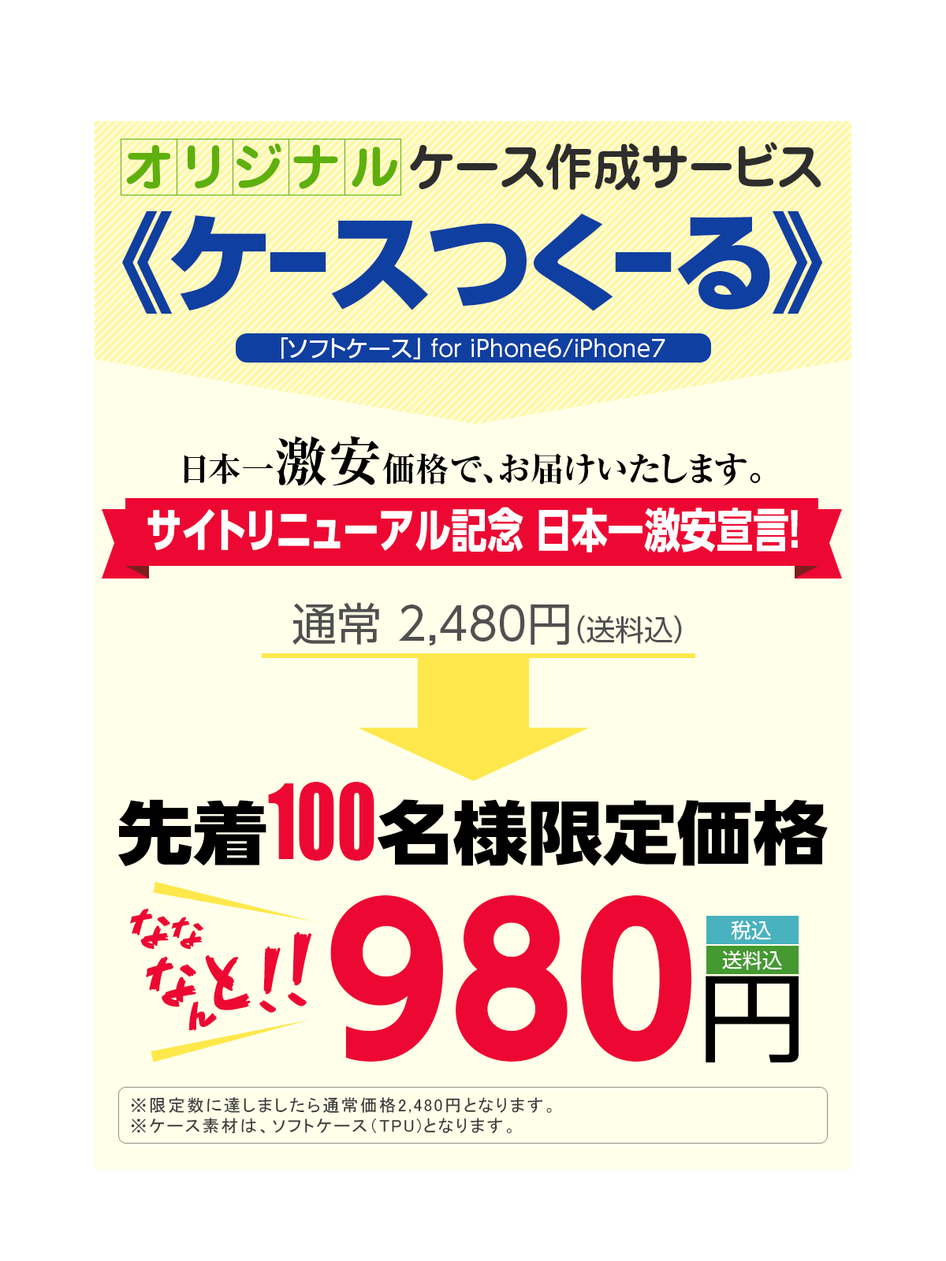
<style>
.page{position:relative;width:946px;height:1261px;background:#ffffff}
.page>*{position:absolute;margin:0}
.t1{font:50px "Jun501Pro-Bold";letter-spacing:0.2em;color:#5fb10f}
.t2{font:50px "Jun501Pro-Bold";color:#2d2d2d;scale:0.96 1}
.t3{font:108.1px "UDShinGoPro-Heavy";letter-spacing:-0.075em;color:#0f3fa1}
.t4{font:108.1px "UDShinGoPro-Heavy";letter-spacing:-0.075em;color:#0f3fa1;scale:0.6 1}
.t5{font:22.7px "UDShinGoPro-Regular";color:#ffffff}
.t6{font:33.8px "RyuminPro-ExBold";color:#000000}
.t7{font:53.5px "RyuminPro-ExBold";color:#000000}
.t8{font:46.7px "UDShinGoPro-Bold";color:#ffffff;scale:0.78 1}
.t9{font:44.9px "UDShinGoPro-Regular";color:#505050}
.t10{font:29.1px "UDShinGoPro-Regular";color:#505050}
.t11{font:68.9px "UDShinGoPro-Heavy";color:#000000;scale:1.09 1}
.t12{font:95px "Impact";color:#ed0833;scale:0.79 1}
.t13{font:198.9px "UDShinGoPro-Bold";color:#ed0833;scale:0.95 1}
.t14{font:51.4px "851CHIKARA-DZUYOKU-KANA-A";color:#ed0833}
.t15{font:40.9px "851CHIKARA-DZUYOKU-KANA-A";color:#ed0833}
.t16{font:20px "UDShinGoPro-Regular";color:#ffffff}
.t17{font:76.4px "851CHIKARA-DZUYOKU-KANA-A";letter-spacing:-0.1em;color:#ed0833}
.t18{font:85.9px "851CHIKARA-DZUYOKU-KANA-A";letter-spacing:-0.1em;color:#ed0833}
.t19{font:64.9px "851CHIKARA-DZUYOKU-KANA-A";color:#ed0833}
.t20{font:39.5px "851CHIKARA-DZUYOKU-KANA-A";letter-spacing:-0.1em;color:#ed0833}
.t21{font:81.2px "851CHIKARA-DZUYOKU-KANA-A";letter-spacing:-0.1em;color:#ed0833}
.t22{font:97.1px "UDShinGoPro-Regular";color:#000000;scale:1.12 1}
.t23{font:17.2px "MS-PGothic";letter-spacing:0.1em;color:#3a3a3a}
</style>
<div class="page">
<p class="t1" style="left:126px;top:143px;width:271px;height:46px">オリジナル</p>
<p class="t2" style="left:410px;top:142px;width:411px;height:49px">ケース作成サービス</p>
<p class="t3" style="left:122px;top:211px;width:701px;height:103px">《ケ<span class="t4">ー</span>スつく<span class="t4">ー</span>る》</p>
<p class="t5" style="left:281px;top:337px;width:384px;height:22px">「ソフトケース」 for iPhone6/iPhone7</p>
<p class="t6" style="left:184px;top:436px;width:576px;height:50px">日本一<span class="t7">激安</span>価格で、お届けいたします。</p>
<p class="t8" style="left:147px;top:507px;width:651px;height:45px">サイトリニューアル記念 日本一激安宣言！</p>
<p class="t9" style="left:292px;top:602px;width:390px;height:43px">通常 2,480円<span class="t10">（送料込）</span></p>
<p class="t11" style="left:117px;top:782px;width:710px;height:85px">先着<span class="t12">100</span>名様限定価格</p>
<p class="t13" style="left:330px;top:895px;width:361px;height:167px">980</p>
<p class="t14" style="left:130px;top:908px;width:73px;height:42px;rotate:1deg">な<span class="t15">な</span></p>
<p class="t16" style="left:731px;top:920px;width:40px;height:20px">税込</p>
<p class="t17" style="left:259px;top:932px;width:53px;height:81px;rotate:-13deg">!<span class="t18">!</span></p>
<p class="t16" style="left:722px;top:950px;width:60px;height:20px">送料込</p>
<p class="t19" style="left:146px;top:956px;width:50px;height:51px;rotate:-4deg">な</p>
<p class="t20" style="left:189px;top:955px;width:62px;height:76px;rotate:-20deg">ん<span class="t21">と</span></p>
<p class="t22" style="left:705px;top:976px;width:93px;height:87px">円</p>
<p class="t23" style="left:131px;top:1097px;width:421px;height:36px">※限定数に達しましたら通常価格2,480円となります。<br>※ケース素材は、ソフトケース（TPU)となります。</p>
</div>
